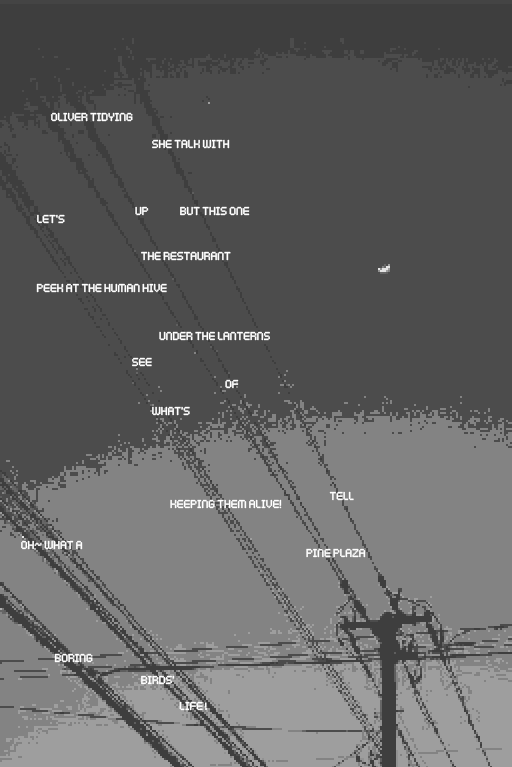
<style>
.page{position:relative;width:512px;height:767px;background:#4c4c4c}
.page>*{position:absolute;margin:0}
.t1{font:9px "KenPixel";color:#ffffff}
.t2{font:9px "AdobeHeitiStd-Regular";color:#ffffff}
</style>
<div class="page">
<p class="t1" style="left:51px;top:112px;width:82px;height:10px">Oliver tidying</p>
<p class="t1" style="left:152px;top:139px;width:78px;height:10px">She talk with</p>
<p class="t1" style="left:135px;top:206px;width:14px;height:10px">up</p>
<p class="t1" style="left:180px;top:206px;width:70px;height:10px">But this one</p>
<p class="t1" style="left:37px;top:214px;width:28px;height:10px">Let's</p>
<p class="t1" style="left:141px;top:251px;width:90px;height:10px">the restaurant</p>
<p class="t1" style="left:36px;top:283px;width:131px;height:10px">peek at the human hive</p>
<p class="t1" style="left:159px;top:331px;width:111px;height:10px">Under the lanterns</p>
<p class="t1" style="left:132px;top:357px;width:20px;height:10px">see</p>
<p class="t1" style="left:225px;top:379px;width:14px;height:10px">of</p>
<p class="t1" style="left:152px;top:406px;width:38px;height:10px">what's</p>
<p class="t1" style="left:329px;top:491px;width:25px;height:10px">tell</p>
<p class="t1" style="left:170px;top:499px;width:112px;height:10px">keeping them alive!</p>
<p class="t1" style="left:21px;top:540px;width:62px;height:10px">Oh~ What a</p>
<p class="t1" style="left:306px;top:548px;width:60px;height:10px">Pine Plaza</p>
<p class="t1" style="left:54px;top:653px;width:39px;height:10px">boring</p>
<p class="t1" style="left:141px;top:675px;width:34px;height:10px">birds'</p>
<p class="t1" style="left:179px;top:701px;width:28px;height:10px">life<span class="t2">！</span></p>
</div>
